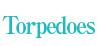
<style>
.page{position:relative;width:97px;height:46px;background:#ffffff}
.page>*{position:absolute;margin:0}
.t1{font:24px "RyuminPro-ExBold";letter-spacing:-0.08em;color:#1dbcc0;scale:0.9 1}
</style>
<div class="page">
<p class="t1" style="left:2px;top:16px;width:93px;height:22px">Torpedoes</p>
</div>
